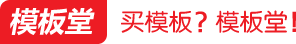
<style>
.page{position:relative;width:296px;height:44px;background:#ffffff}
.page>*{position:absolute;margin:0}
.t1{font:28px "MicrosoftYaHei-Bold";color:#ffffff;font-style:italic}
.t2{font:24px "FZY3JW--GB1-0";color:#ed1c24}
</style>
<div class="page">
<p class="t1" style="left:10px;top:7px;width:85px;height:29px">模板堂</p>
<p class="t2" style="left:121px;top:10px;width:71px;height:23px">买模板</p>
<p class="t2" style="left:215px;top:10px;width:72px;height:23px">模板堂</p>
</div>
